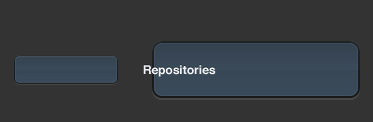
<style>
.page{position:relative;width:373px;height:122px;background:#333333}
.page>*{position:absolute;margin:0}
.t1{font:12px "Helvetica-Bold";color:#f0f2f5}
</style>
<div class="page">
<p class="t1" style="left:143px;top:65px;width:73px;height:12px">Repositories</p>
</div>
